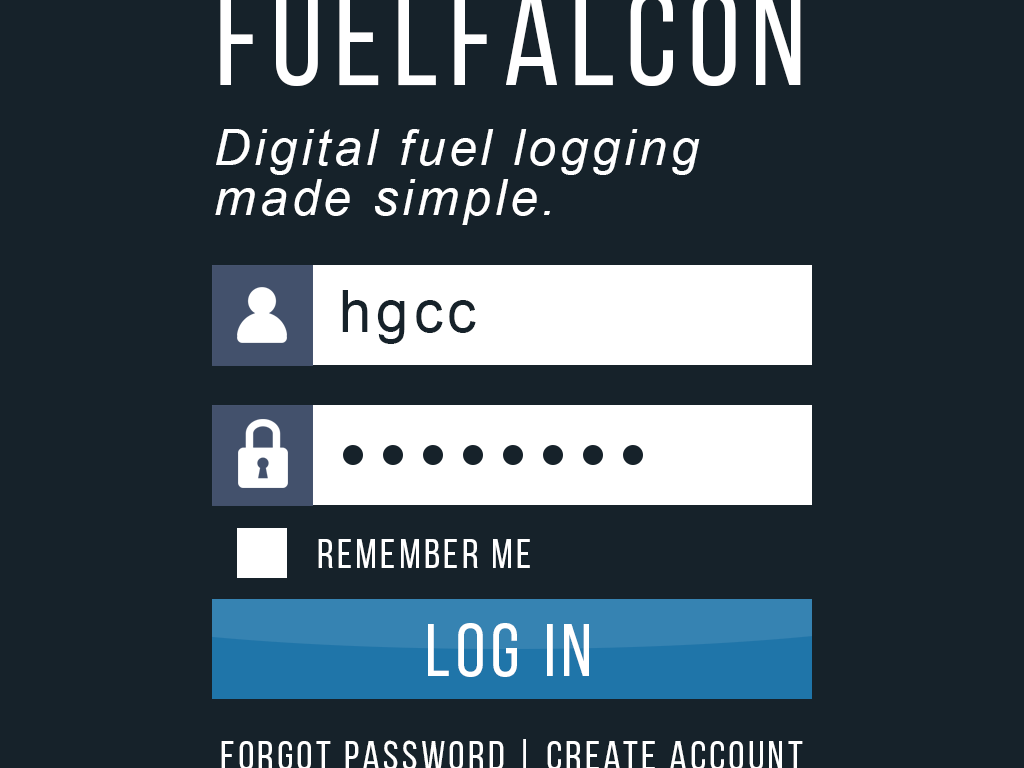
<style>
.page{position:relative;width:1024px;height:768px;background:#16222a}
.page>*{position:absolute;margin:0}
.t1{font:50px/50px "Arial-ItalicMT";letter-spacing:0.08em;color:#ffffff}
.t2{font:58.3px "ArialMT";letter-spacing:0.08em;color:#16222a}
.t3{font:41.7px "BebasNeueRegular";letter-spacing:0.08em;color:#ffffff}
.t4{font:74.8px "BebasNeueRegular";letter-spacing:0.08em;color:#ffffff}
</style>
<div class="page">
<p class="t1" style="left:215px;top:129px;width:485px;height:96px;text-align:right">Digital fuel logging<br>made simple.</p>
<p class="t2" style="left:342px;top:290px;width:134px;height:54px">hgcc</p>
<p class="t3" style="left:318px;top:539px;width:212px;height:29px">remember me</p>
<p class="t4" style="left:428px;top:623px;width:161px;height:54px">log in</p>
</div>
